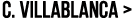
<style>
.page{position:relative;width:134px;height:20px;background:#ffffff}
.page>*{position:absolute;margin:0}
.t1{font:22.9px "BebasNeueRegular";color:#010000;font-weight:bold}
</style>
<div class="page">
<p class="t1" style="left:2px;top:0px;width:130px;height:18px">c. villablanca &gt;</p>
</div>
